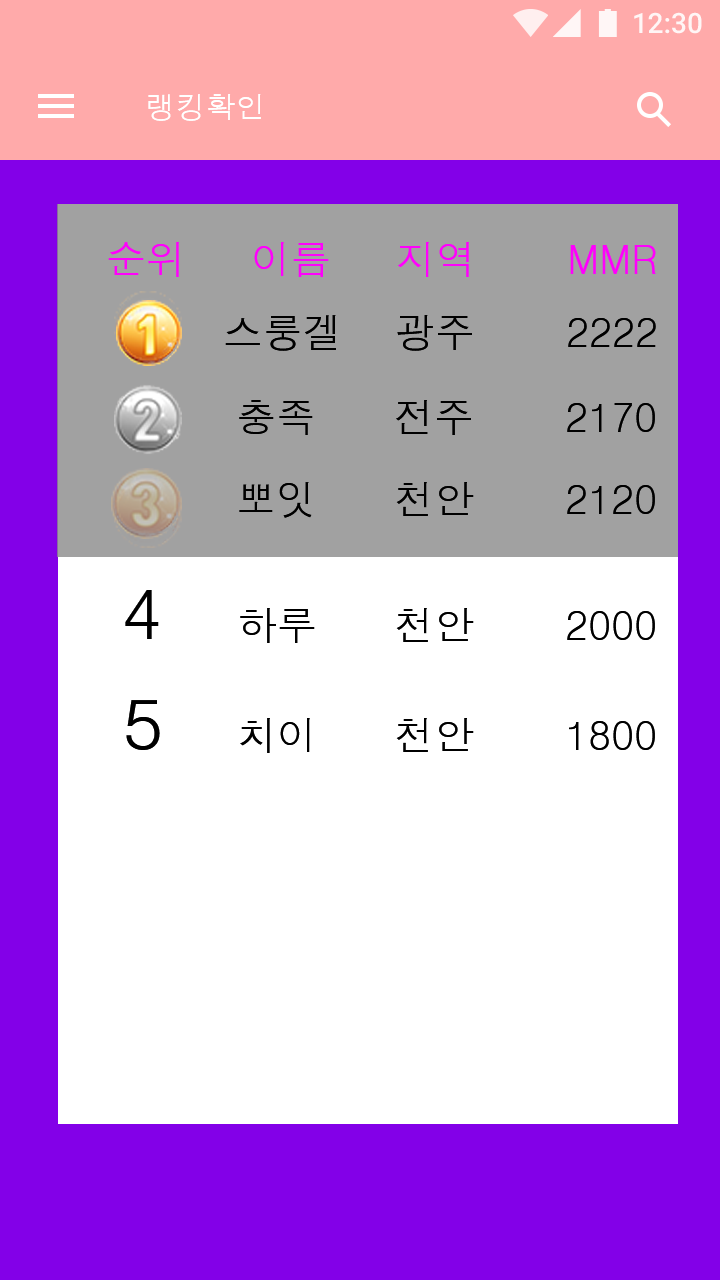
<style>
.page{position:relative;width:720px;height:1280px;background:#ffffff}
.page>*{position:absolute;margin:0}
.t1{font:30px "Dotum";color:#ffffff}
.t2{font:40px "Dotum";color:#ff00fc}
.t3{font:40px "Dotum";color:#000000}
.t4{font:72px "Dotum";color:#000000}
</style>
<div class="page">
<p class="t1" style="left:148px;top:94px;width:113px;height:27px">랭킹확인</p>
<p class="t2" style="left:108px;top:242px;width:548px;height:35px">순위     이름     지역       MMR</p>
<p class="t3" style="left:225px;top:315px;width:431px;height:36px">스룽겔    광주       2222</p>
<p class="t3" style="left:239px;top:400px;width:416px;height:35px">충족      전주       2170</p>
<p class="t3" style="left:239px;top:482px;width:416px;height:36px">뽀잇      천안       2120</p>
<p class="t3" style="left:125px;top:590px;width:530px;height:53px"><span class="t4">4             </span>하루        천안       2000</p>
<p class="t3" style="left:126px;top:700px;width:529px;height:53px"><span class="t4">5             </span>치이        천안       1800</p>
</div>
